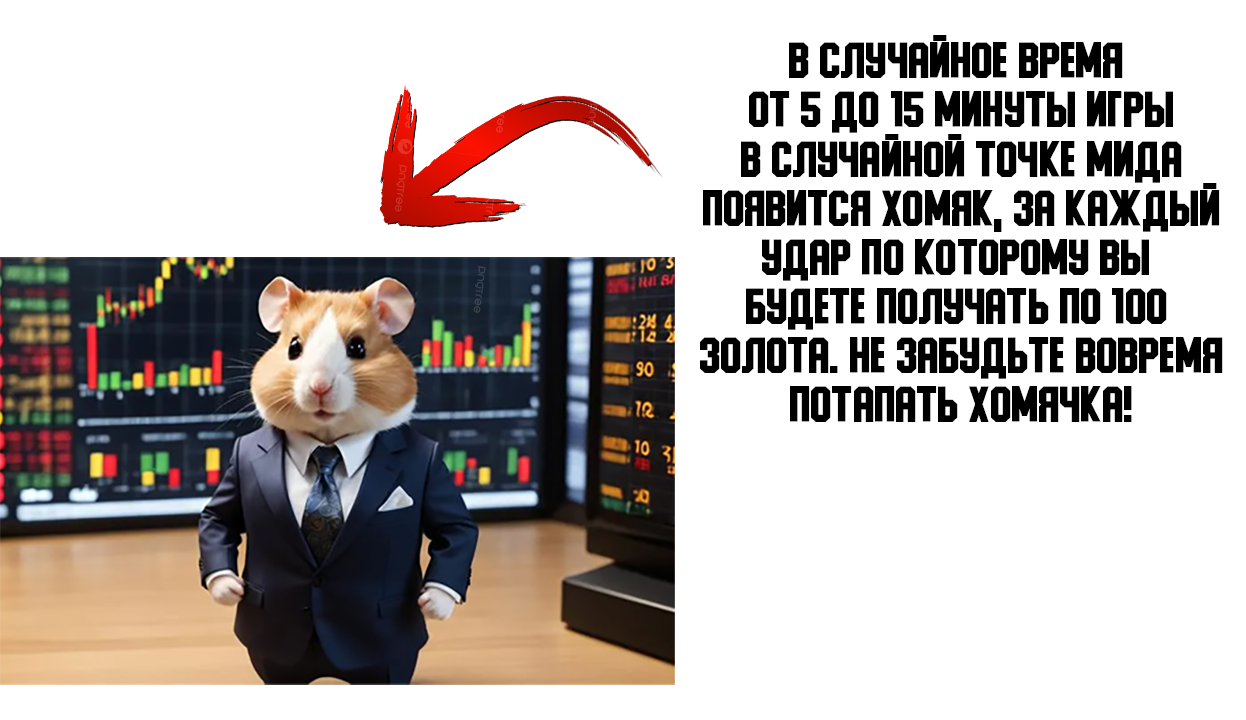
<style>
.page{position:relative;width:1246px;height:720px;background:#ffffff}
.page>*{position:absolute;margin:0}
.t1{font:40.9px "PonterS";color:#000000}
</style>
<div class="page">
<p class="t1" style="left:700px;top:35px;width:523px;height:387px;text-align:center">В случайное время <br>от 5 до 15 минуты игры<br>в случайной точке мида<br>появится хомяк, за каждый<br>удар по которому вы <br>будете получать по 100 <br>золота. Не забудьте вовремя<br>потапать хомячка!</p>
</div>
